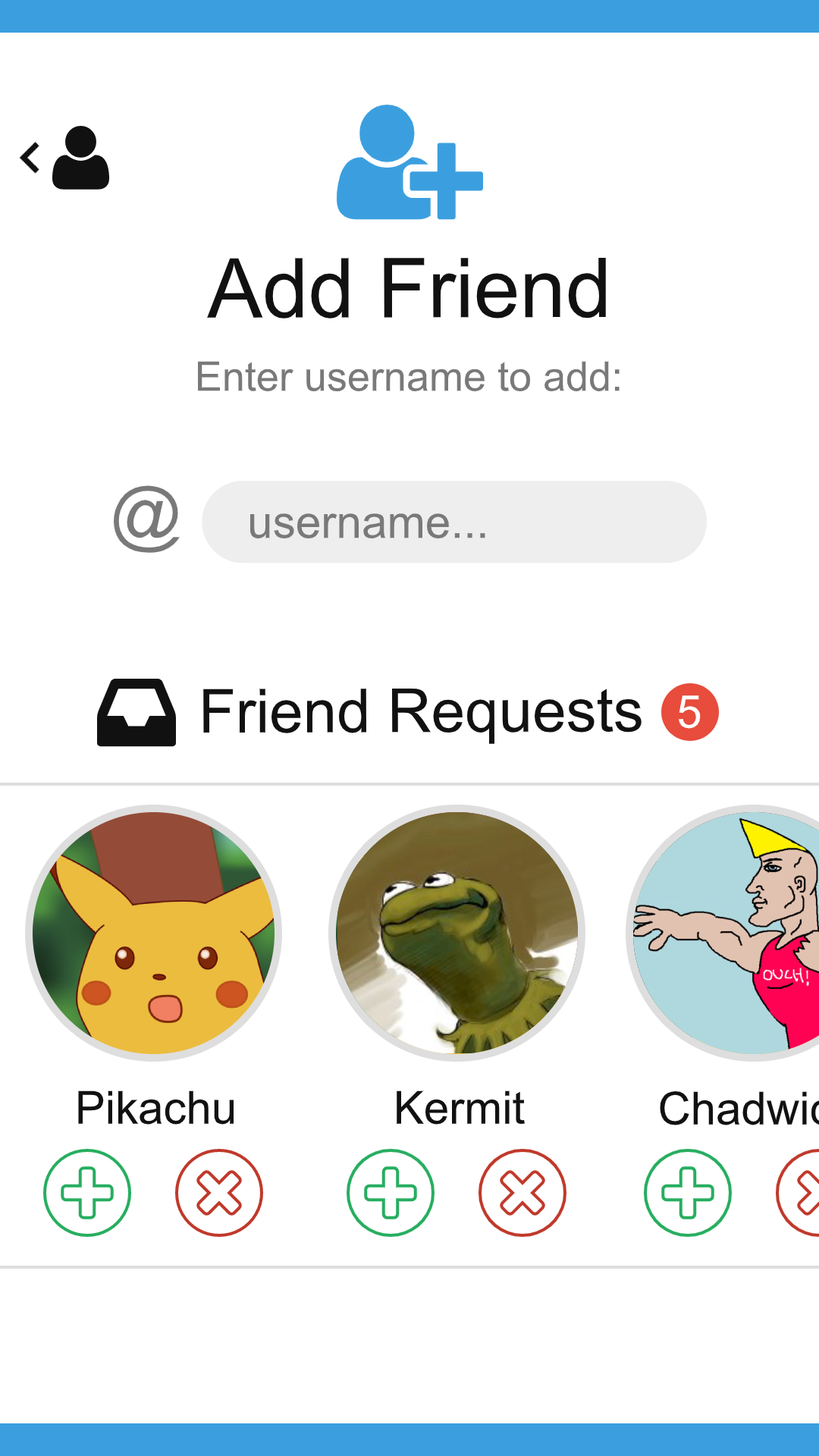
<style>
.page{position:relative;width:819px;height:1456px;background:#ffffff}
.page>*{position:absolute;margin:0}
.t1{font:82.7px "ArialMT";color:#111111}
.t2{font:40.9px "ArialMT";color:#797979}
.t3{font:71.2px "ArialMT";color:#797979}
.t4{font:45.7px "ArialMT";color:#797979}
.t5{font:60.7px "ArialMT";color:#111111}
.t6{font:45.5px "ArialMT";color:#ffffff}
.t7{font:45.5px "ArialMT";color:#111111}
</style>
<div class="page">
<p class="t1" style="left:207px;top:257px;width:399px;height:61px">Add Friend</p>
<p class="t2" style="left:198px;top:361px;width:422px;height:30px">Enter username to add:</p>
<p class="t3" style="left:114px;top:485px;width:66px;height:68px">@</p>
<p class="t4" style="left:250px;top:513px;width:235px;height:25px">username...</p>
<p class="t5" style="left:203px;top:688px;width:439px;height:56px">Friend Requests</p>
<p class="t6" style="left:678px;top:695px;width:23px;height:34px">5</p>
<p class="t7" style="left:78px;top:1090px;width:156px;height:35px">Pikachu</p>
<p class="t7" style="left:397px;top:1090px;width:128px;height:35px">Kermit</p>
</div>
